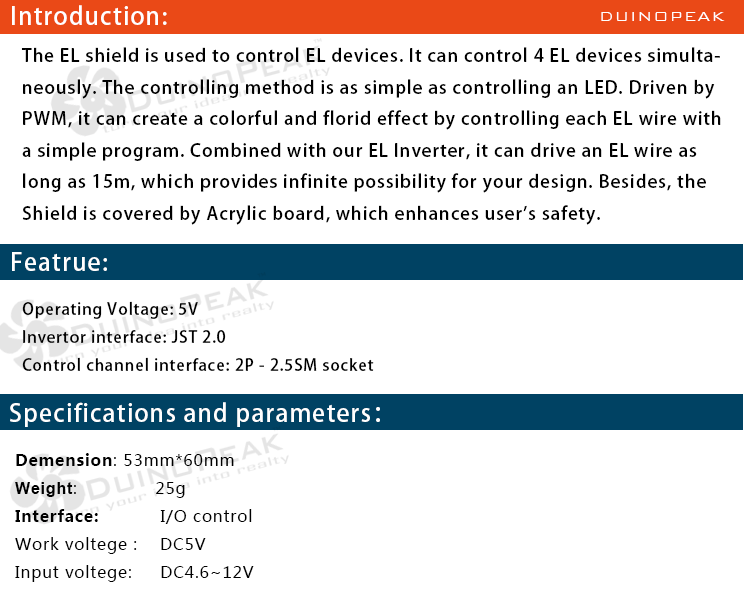
<style>
.page{position:relative;width:744px;height:598px;background:#ffffff}
.page>*{position:absolute;margin:0}
.t1{font:24px "AdobeHeitiStd-Regular";letter-spacing:0.05em;color:#ffffff}
.t2{font:18px "BankGothicBT-Light";letter-spacing:0.05em;color:#ffffff}
.t3{font:18px "AdobeHeitiStd-Regular";letter-spacing:0.05em;color:#000000}
.t4{font:16px "AdobeHeitiStd-Regular";letter-spacing:0.05em;color:#000000}
.t5{font:16px "MicrosoftYaHei";letter-spacing:0.05em;color:#000000}
.t6{font:16px "MicrosoftYaHei-Bold";letter-spacing:0.05em;color:#000000}
.t7{font:16px "Arial-BoldMT";letter-spacing:0.05em;color:#000000}
</style>
<div class="page">
<p class="t1" style="left:12px;top:5px;width:155px;height:20px">Introduction:</p>
<p class="t2" style="left:601px;top:12px;width:124px;height:9px">DUINOPEAK</p>
<p class="t3" style="left:21px;top:47px;width:700px;height:178px">The EL shield is used to control EL devices. It can control 4 EL devices simulta-<br>neously. The controlling method is as simple as controlling an LED. Driven by <br>PWM, it can create a colorful and florid effect by controlling each EL wire with <br>a simple program. Combined with our EL Inverter, it can drive an EL wire as <br>long as 15m, which provides infinite possibility for your design. Besides, the <br>Shield is covered by Acrylic board, which enhances user's safety.</p>
<p class="t1" style="left:12px;top:252px;width:95px;height:19px">Featrue:</p>
<p class="t4" style="left:22px;top:301px;width:352px;height:70px">Operating Voltage: 5V <br>Invertor interface: JST 2.0 <br>Control channel interface: 2P - 2.5SM socket</p>
<p class="t1" style="left:10px;top:402px;width:370px;height:25px">Specifications and parameters：</p>
<p class="t5" style="left:15px;top:453px;width:239px;height:129px"><span class="t6">Demension</span>: 53mm*60mm<br><span class="t7">Weight</span>:              25g<br><span class="t6">Interface:           </span>I/O control <br>Work voltege :    DC5V<br>Input voltege:     DC4.6~12V</p>
</div>
